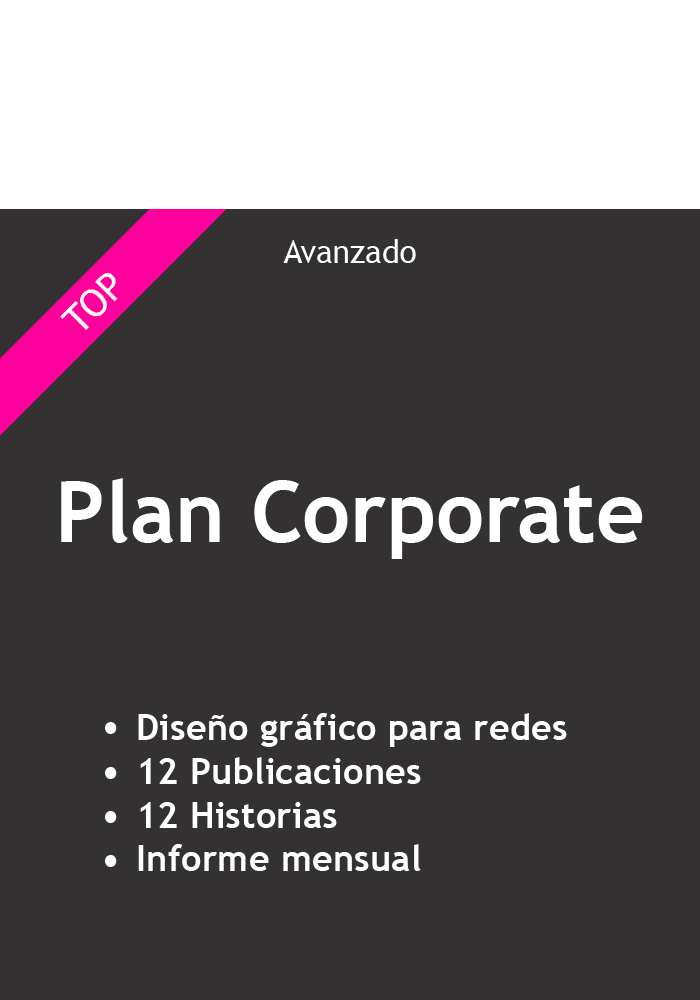
<style>
.page{position:relative;width:700px;height:1000px;background:#333131}
.page>*{position:absolute;margin:0}
.t1{font:31.8px "TrebuchetMS";color:#ffffff}
.t2{font:84.7px "TrebuchetMS-Bold";color:#ffffff}
.t3{font:36.4px "TrebuchetMS-Bold";color:#ffffff}
.t4{font:95.2px "MyriadPro-Regular";color:#ffffff}
</style>
<div class="page">
<p class="t1" style="left:283px;top:239px;width:133px;height:24px">Avanzado</p>
<p class="t2" style="left:61px;top:478px;width:582px;height:81px">Plan Corporate</p>
<p class="t3" style="left:138px;top:713px;width:429px;height:158px">Diseño gráfico para redes<br>12 Publicaciones<br>12 Historias<br>Informe mensual</p>
<p class="t4" style="left:105px;top:722px;width:12px;height:12px">.</p>
<p class="t4" style="left:105px;top:767px;width:12px;height:12px">.</p>
<p class="t4" style="left:105px;top:811px;width:12px;height:12px">.</p>
<p class="t4" style="left:105px;top:855px;width:12px;height:12px">.</p>
</div>
